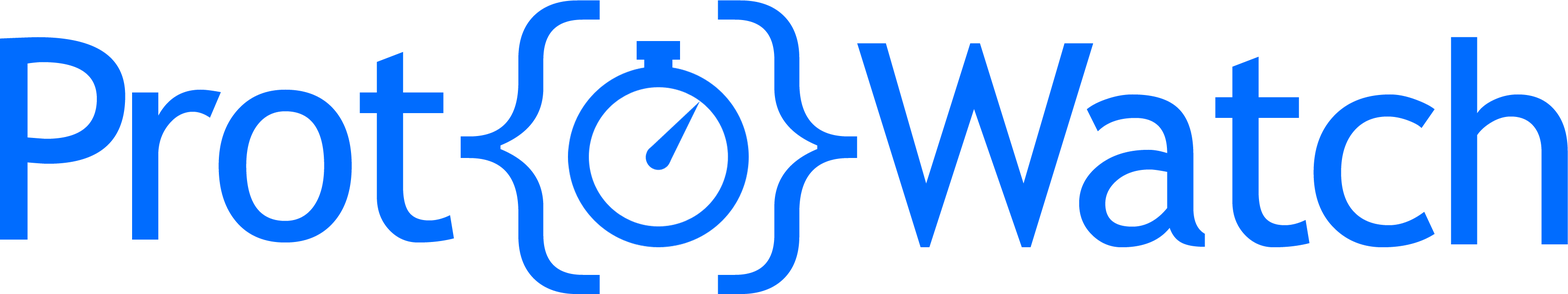
<style>
.page{position:relative;width:1568px;height:294px;background:#ffffff}
.page>*{position:absolute;margin:0}
.t1{font:304.8px "Meiryo";letter-spacing:-0.04em;color:#006cff}
.t2{font:281px "TrebuchetMS";letter-spacing:-0.04em;color:#006cff}
</style>
<div class="page">
<p class="t1" style="left:461px;top:0px;width:396px;height:294px">{ }</p>
<p class="t2" style="left:0px;top:37px;width:454px;height:205px">Prot</p>
<p class="t2" style="left:857px;top:37px;width:711px;height:210px">Watch</p>
</div>
